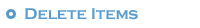
<style>
.page{position:relative;width:200px;height:28px;background:#ffffff}
.page>*{position:absolute;margin:0}
.t1{font:16px "CopperplateGothic-Bold";color:#589bcf}
</style>
<div class="page">
<p class="t1" style="left:25px;top:8px;width:113px;height:12px">Delete Items</p>
</div>
